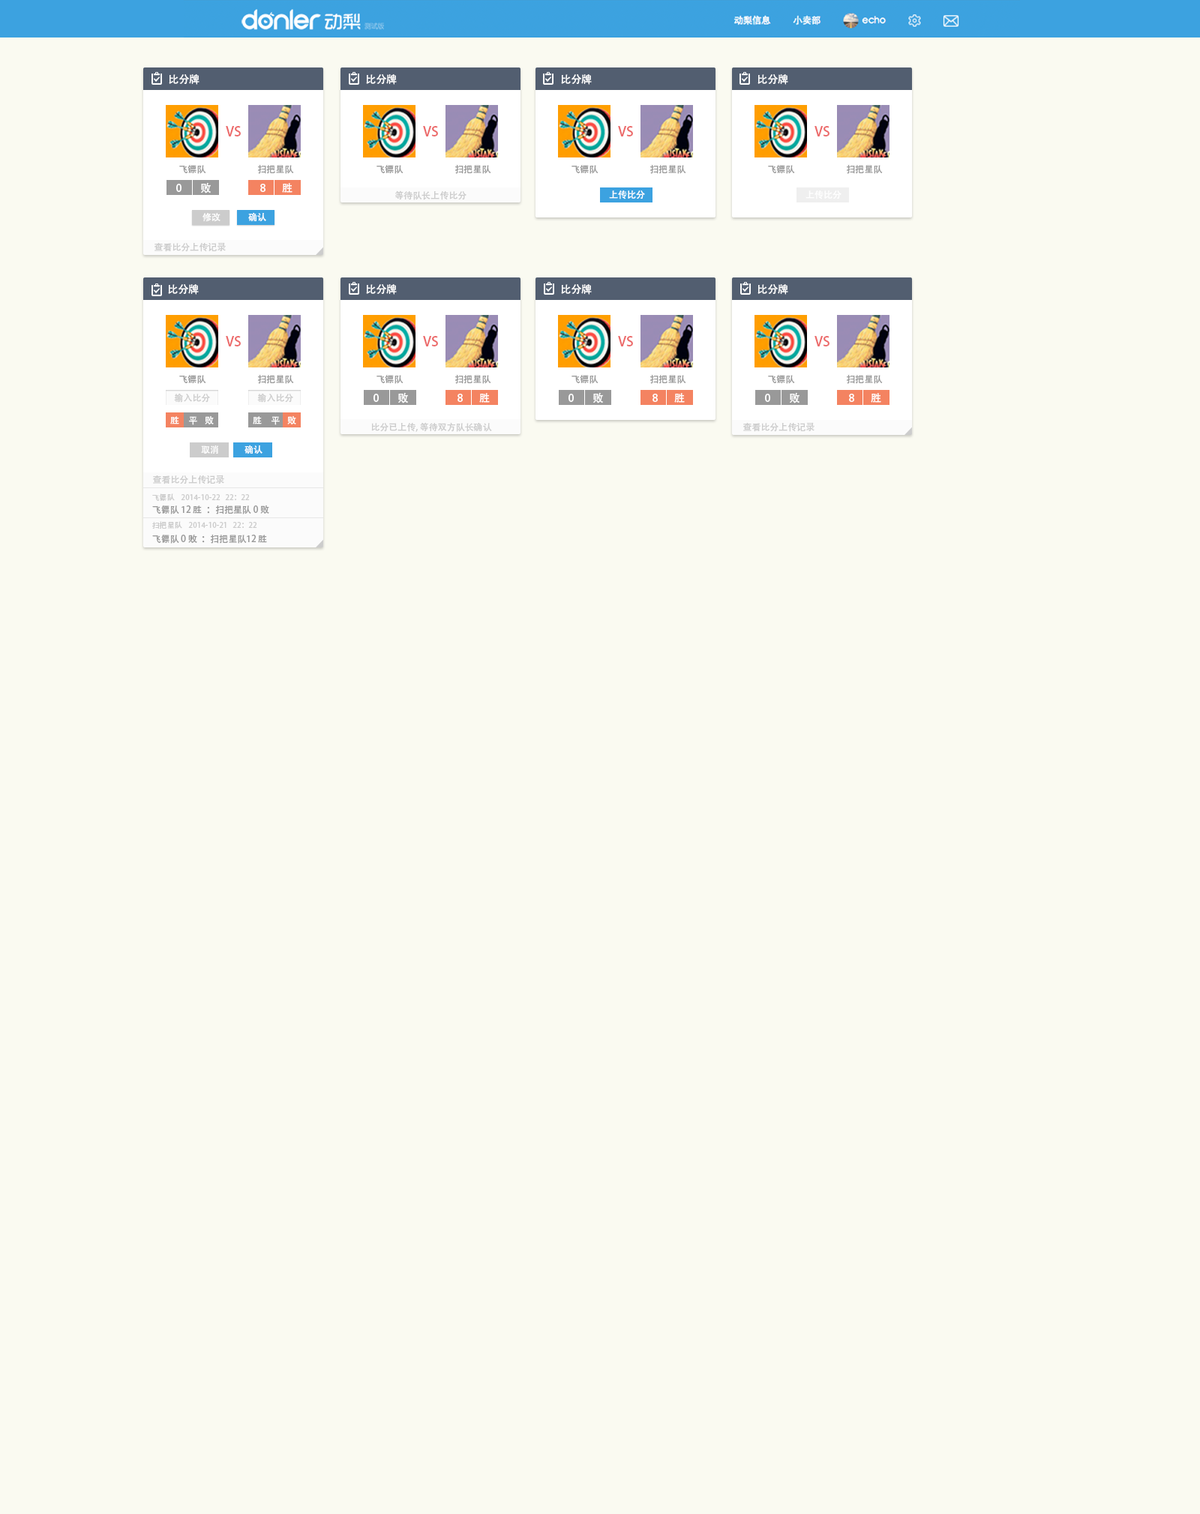
<style>
.page{position:relative;width:1200px;height:1514px;background:#fafaf1}
.page>*{position:absolute;margin:0}
.t1{font:10.5px "AdobeHeitiStd-Regular";color:#ffffff}
.t2{font:13.5px "AdobeHeitiStd-Regular";color:#ec6a6a}
.t3{font:9px "AdobeHeitiStd-Regular";color:#999999}
.t4{font:9px "AdobeHeitiStd-Regular";color:#cccccc}
.t5{font:9px "AdobeHeitiStd-Regular";color:#ffffff}
.t6{font:7.5px/15px "AdobeHeitiStd-Regular";color:#cccccc}
.t7{font:9px/12.8px "AdobeHeitiStd-Regular";color:#999999}
.t8{font:9px/14.2px "AdobeHeitiStd-Regular";color:#999999}
</style>
<div class="page">
<p class="t1" style="left:169px;top:74px;width:31px;height:11px">比分牌</p>
<p class="t1" style="left:366px;top:74px;width:31px;height:11px">比分牌</p>
<p class="t1" style="left:561px;top:74px;width:31px;height:11px">比分牌</p>
<p class="t1" style="left:758px;top:74px;width:30px;height:11px">比分牌</p>
<p class="t2" style="left:226px;top:126px;width:15px;height:10px">VS</p>
<p class="t2" style="left:423px;top:126px;width:15px;height:10px">VS</p>
<p class="t2" style="left:618px;top:126px;width:15px;height:10px">VS</p>
<p class="t2" style="left:814px;top:126px;width:16px;height:10px">VS</p>
<p class="t3" style="left:179px;top:165px;width:27px;height:9px">飞镖队</p>
<p class="t3" style="left:258px;top:164px;width:36px;height:10px">扫把星队</p>
<p class="t3" style="left:376px;top:165px;width:28px;height:9px">飞镖队</p>
<p class="t3" style="left:455px;top:164px;width:36px;height:10px">扫把星队</p>
<p class="t3" style="left:572px;top:165px;width:26px;height:9px">飞镖队</p>
<p class="t3" style="left:650px;top:164px;width:36px;height:10px">扫把星队</p>
<p class="t3" style="left:768px;top:165px;width:27px;height:9px">飞镖队</p>
<p class="t3" style="left:847px;top:164px;width:36px;height:10px">扫把星队</p>
<p class="t1" style="left:176px;top:182px;width:35px;height:12px">0        败</p>
<p class="t1" style="left:260px;top:183px;width:32px;height:10px">8       胜</p>
<p class="t4" style="left:395px;top:190px;width:71px;height:10px">等待队长上传比分</p>
<p class="t5" style="left:609px;top:190px;width:36px;height:10px">上传比分</p>
<p class="t5" style="left:806px;top:190px;width:36px;height:10px">上传比分</p>
<p class="t5" style="left:202px;top:213px;width:18px;height:8px">修改</p>
<p class="t5" style="left:248px;top:212px;width:18px;height:10px">确认</p>
<p class="t4" style="left:154px;top:242px;width:72px;height:10px">查看比分上传记录</p>
<p class="t1" style="left:168px;top:284px;width:31px;height:11px">比分牌</p>
<p class="t1" style="left:366px;top:284px;width:31px;height:11px">比分牌</p>
<p class="t1" style="left:561px;top:284px;width:31px;height:11px">比分牌</p>
<p class="t1" style="left:758px;top:284px;width:30px;height:11px">比分牌</p>
<p class="t2" style="left:226px;top:336px;width:15px;height:10px">VS</p>
<p class="t2" style="left:423px;top:336px;width:15px;height:10px">VS</p>
<p class="t2" style="left:618px;top:336px;width:15px;height:10px">VS</p>
<p class="t2" style="left:814px;top:336px;width:16px;height:10px">VS</p>
<p class="t3" style="left:179px;top:375px;width:27px;height:9px">飞镖队</p>
<p class="t3" style="left:258px;top:374px;width:36px;height:10px">扫把星队</p>
<p class="t3" style="left:376px;top:375px;width:28px;height:9px">飞镖队</p>
<p class="t3" style="left:455px;top:374px;width:36px;height:10px">扫把星队</p>
<p class="t3" style="left:572px;top:375px;width:26px;height:9px">飞镖队</p>
<p class="t3" style="left:650px;top:374px;width:36px;height:10px">扫把星队</p>
<p class="t3" style="left:768px;top:375px;width:27px;height:9px">飞镖队</p>
<p class="t3" style="left:847px;top:374px;width:36px;height:10px">扫把星队</p>
<p class="t4" style="left:174px;top:393px;width:36px;height:10px">输入比分</p>
<p class="t4" style="left:257px;top:393px;width:36px;height:10px">输入比分</p>
<p class="t1" style="left:374px;top:392px;width:34px;height:12px">0        败</p>
<p class="t1" style="left:458px;top:393px;width:32px;height:10px">8       胜</p>
<p class="t1" style="left:568px;top:392px;width:35px;height:12px">0        败</p>
<p class="t1" style="left:652px;top:393px;width:33px;height:10px">8       胜</p>
<p class="t1" style="left:765px;top:392px;width:35px;height:12px">0        败</p>
<p class="t1" style="left:849px;top:393px;width:32px;height:10px">8       胜</p>
<p class="t5" style="left:170px;top:416px;width:44px;height:9px">胜    平    败</p>
<p class="t5" style="left:253px;top:416px;width:43px;height:9px">胜    平    败</p>
<p class="t4" style="left:371px;top:422px;width:121px;height:10px">比分已上传, 等待双方队长确认</p>
<p class="t4" style="left:743px;top:422px;width:71px;height:10px">查看比分上传记录</p>
<p class="t5" style="left:201px;top:446px;width:17px;height:8px">取消</p>
<p class="t5" style="left:244px;top:445px;width:18px;height:9px">确认</p>
<p class="t4" style="left:153px;top:475px;width:71px;height:9px">查看比分上传记录</p>
<p class="t6" style="left:152px;top:494px;width:117px;height:20px">飞镖队    2014-10-22   22：22<br><span class="t7">飞镖队 12 胜  ：扫把星队 0 败</span></p>
<p class="t6" style="left:152px;top:521px;width:115px;height:23px">扫把星队    2014-10-21   22：22<br><span class="t8">飞镖队 0 败  ：扫把星队12 胜</span></p>
</div>
